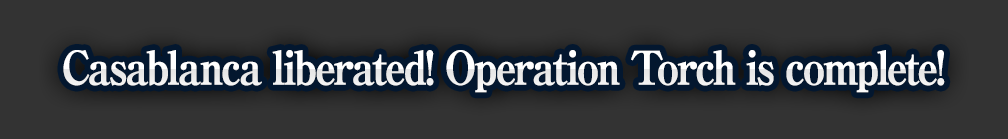
<style>
.page{position:relative;width:1008px;height:139px;background:#333333}
.page>*{position:absolute;margin:0}
.t1{font:46px "RyuminPro-ExBold";letter-spacing:-0.08em;color:#ffffff;font-weight:bold;scale:0.9 1}
</style>
<div class="page">
<p class="t1" style="left:63px;top:50px;width:882px;height:43px">Casablanca liberated! Operation Torch is complete!</p>
</div>
